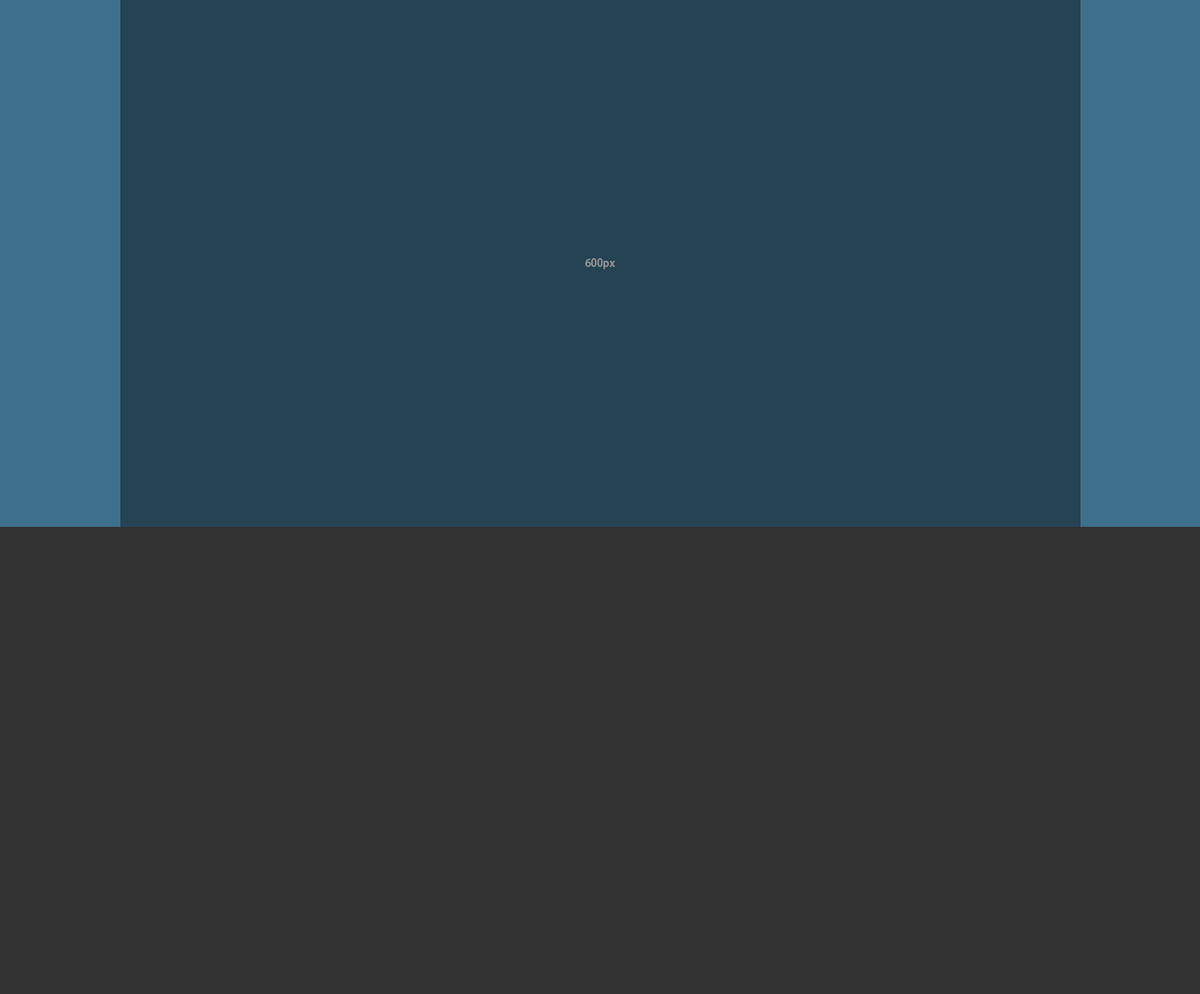
<style>
.page{position:relative;width:1200px;height:994px;background:#333333}
.page>*{position:absolute;margin:0}
.t1{font:10.5px "AdobeHeitiStd-Regular";color:#999898}
</style>
<div class="page">
<p class="t1" style="left:585px;top:258px;width:30px;height:12px">600px</p>
</div>
